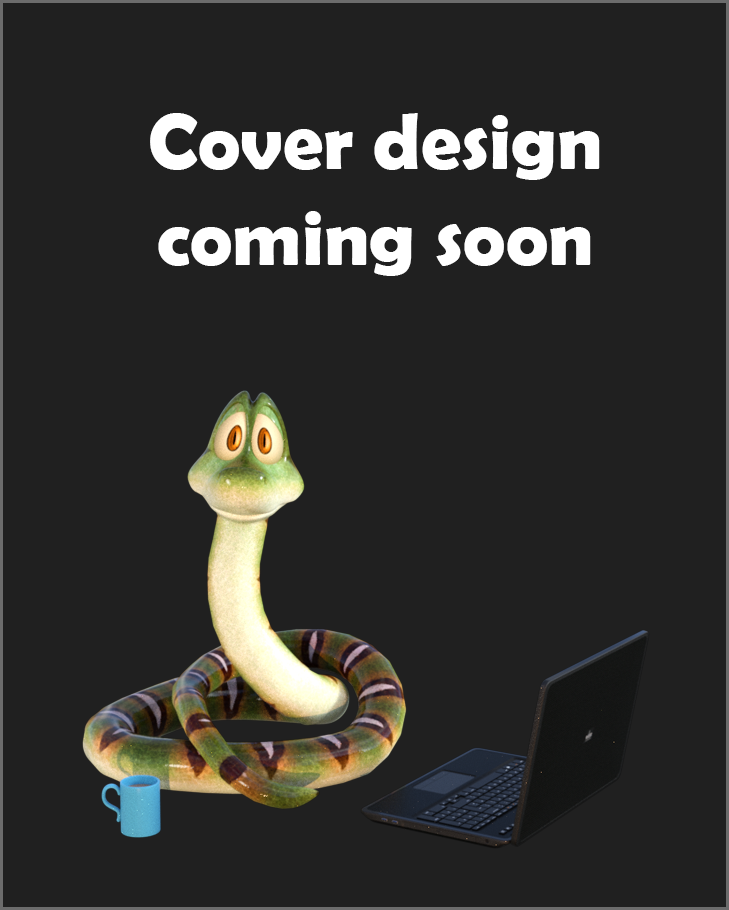
<style>
.page{position:relative;width:729px;height:910px;background:#202020}
.page>*{position:absolute;margin:0}
.t1{font:80px "BerlinSansFBDemi-Bold";color:#ffffff}
</style>
<div class="page">
<p class="t1" style="left:150px;top:113px;width:450px;height:163px;text-align:center">Cover design<br>coming soon</p>
</div>
